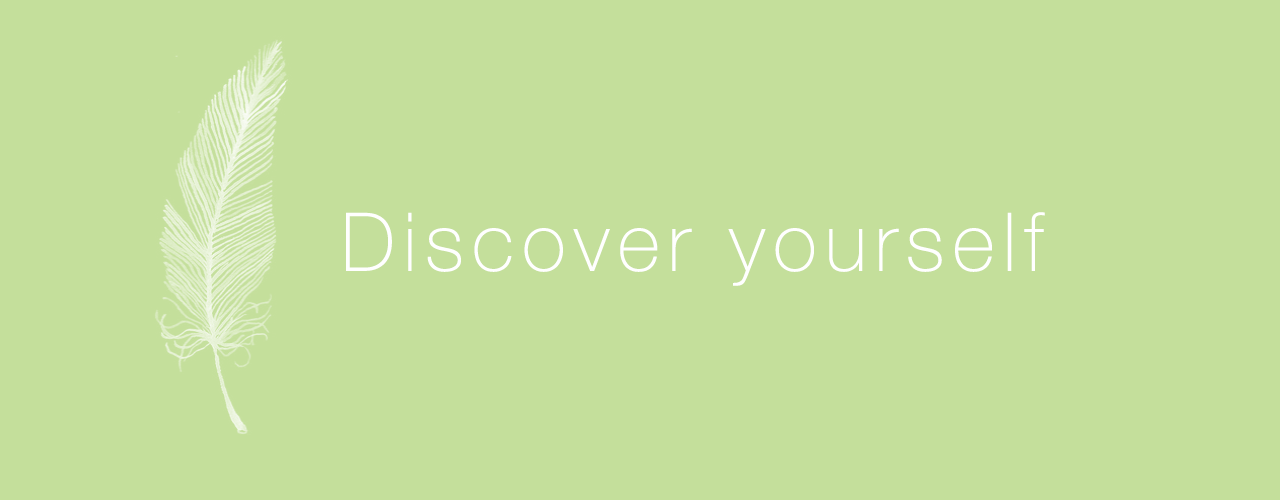
<style>
.page{position:relative;width:1280px;height:500px;background:#c4df9b}
.page>*{position:absolute;margin:0}
.t1{font:81px "HelveticaNeue-Thin";letter-spacing:0.1em;color:#ffffff}
</style>
<div class="page">
<p class="t1" style="left:346px;top:212px;width:699px;height:74px">Discover yourself</p>
</div>
